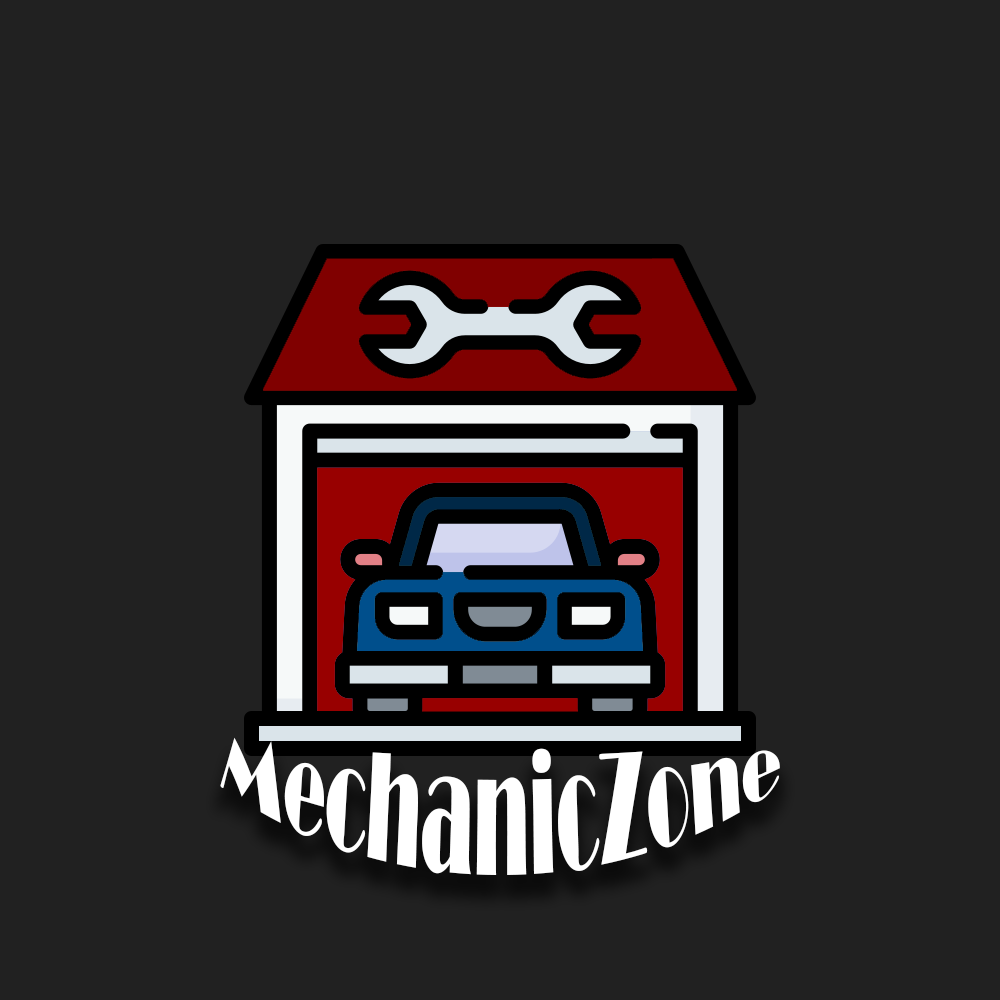
<style>
.page{position:relative;width:1000px;height:1000px;background:#212121}
.page>*{position:absolute;margin:0}
.t1{font:71.2px/94.9px "Broadway";color:#ffffff}
</style>
<div class="page">
<p class="t1" style="left:220px;top:737px;width:560px;height:138px;text-align:right">MechanicZone</p>
</div>
